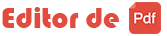
<style>
.page{position:relative;width:167px;height:36px;background:#ffffff}
.page>*{position:absolute;margin:0}
.t1{font:30px "Bauhaus93";color:#e24c3f}
</style>
<div class="page">
<p class="t1" style="left:2px;top:7px;width:117px;height:21px">Editor de</p>
</div>
